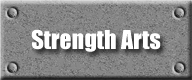
<style>
.page{position:relative;width:192px;height:80px}
.page>*{position:absolute;margin:0}
.t1{font:24px "Impact";color:#ffffff}
</style>
<div class="page">
<p class="t1" style="left:31px;top:29px;width:130px;height:23px">Strength Arts</p>
</div>
